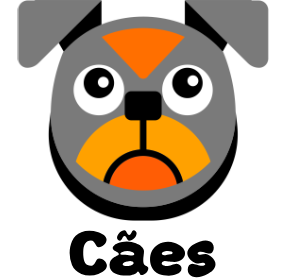
<style>
.page{position:relative;width:287px;height:278px;background:#ffffff}
.page>*{position:absolute;margin:0}
.t1{font:55.9px "Kush-Fat";color:#000000}
</style>
<div class="page">
<p class="t1" style="left:69px;top:230px;width:147px;height:48px">Cães</p>
</div>
